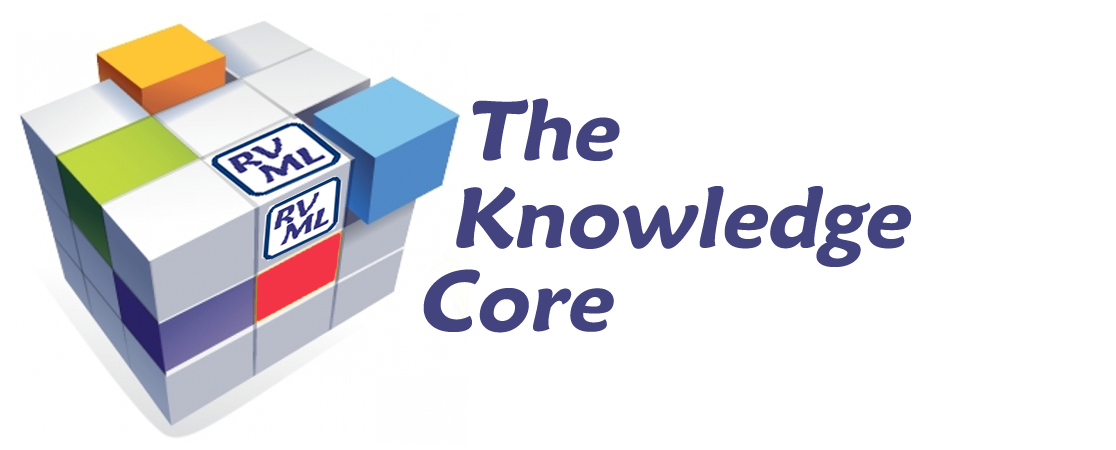
<style>
.page{position:relative;width:1116px;height:450px;background:#ffffff}
.page>*{position:absolute;margin:0}
.t1{font:84.7px "MaiandraGD-DemiBold";color:#43437f;font-style:italic}
</style>
<div class="page">
<p class="t1" style="left:472px;top:98px;width:148px;height:63px">The</p>
<p class="t1" style="left:456px;top:186px;width:455px;height:81px">Knowledge</p>
<p class="t1" style="left:423px;top:269px;width:191px;height:64px">Core</p>
</div>
